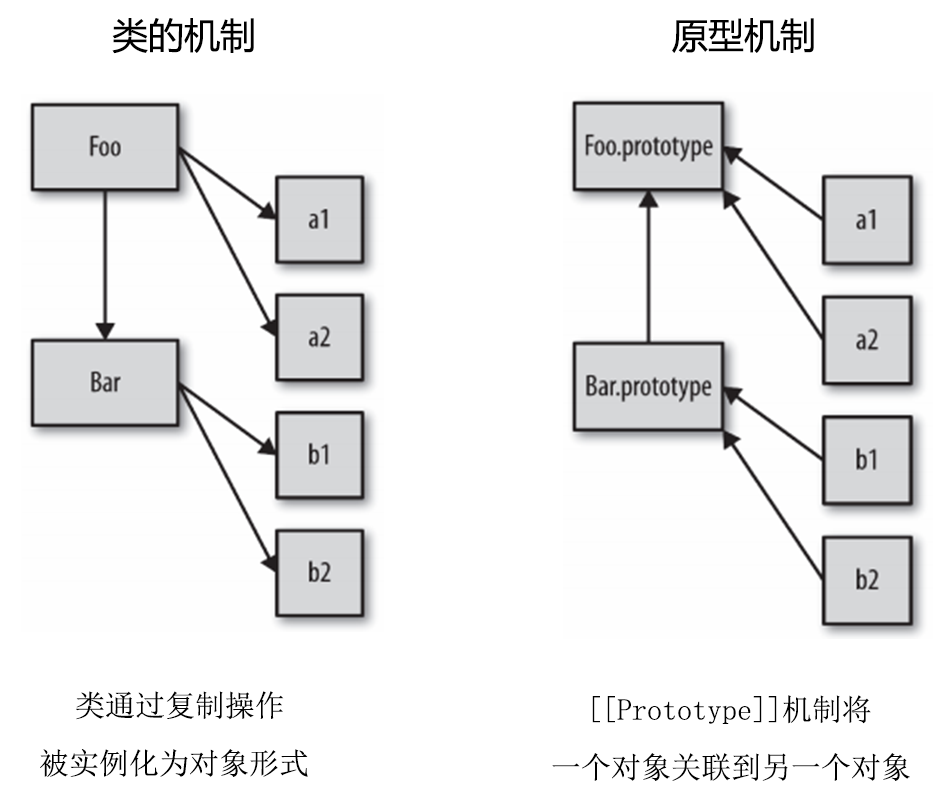
<style>
.page{position:relative;width:952px;height:808px;background:#ffffff}
.page>*{position:absolute;margin:0}
.t1{font:36px "MicrosoftYaHei";color:#000000}
.t2{font:30px "NSimSun";color:#000000}
.t3{font:36px "NSimSun";color:#000000}
</style>
<div class="page">
<p class="t1" style="left:112px;top:18px;width:142px;height:36px">类的机制</p>
<p class="t1" style="left:672px;top:18px;width:142px;height:35px">原型机制</p>
<p class="t2" style="left:40px;top:691px;width:268px;height:86px"><span class="t3">  </span>类通过复制操作<br>被实例化为对象形式</p>
<p class="t2" style="left:552px;top:695px;width:358px;height:86px"><span class="t3">  </span>[[Prototype]]机制将<br>一个对象关联到另一个对象</p>
</div>
